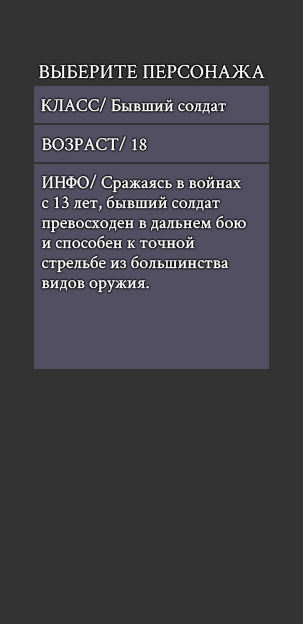
<style>
.page{position:relative;width:303px;height:624px;background:#333333}
.page>*{position:absolute;margin:0}
.t1{font:20px "CrimsonText-Regular";color:#ffffff}
.t2{font:18px "CrimsonText-Regular";color:#ffffff}
.t3{font:18px/20px "CrimsonText-Regular";color:#ffffff}
</style>
<div class="page">
<p class="t1" style="left:39px;top:64px;width:226px;height:15px">ВЫБЕРИТЕ ПЕРСОНАЖА</p>
<p class="t2" style="left:41px;top:97px;width:186px;height:17px">КЛАСС/ Бывший солдат</p>
<p class="t2" style="left:42px;top:136px;width:105px;height:15px">ВОЗРАСТ/ 18</p>
<p class="t3" style="left:41px;top:174px;width:205px;height:119px">ИНФО/ Сражаясь в войнах<br>с 13 лет, бывший солдат<br>превосходен в дальнем бою<br>и способен к точной<br>стрельбе из большинства<br>видов оружия.</p>
</div>
